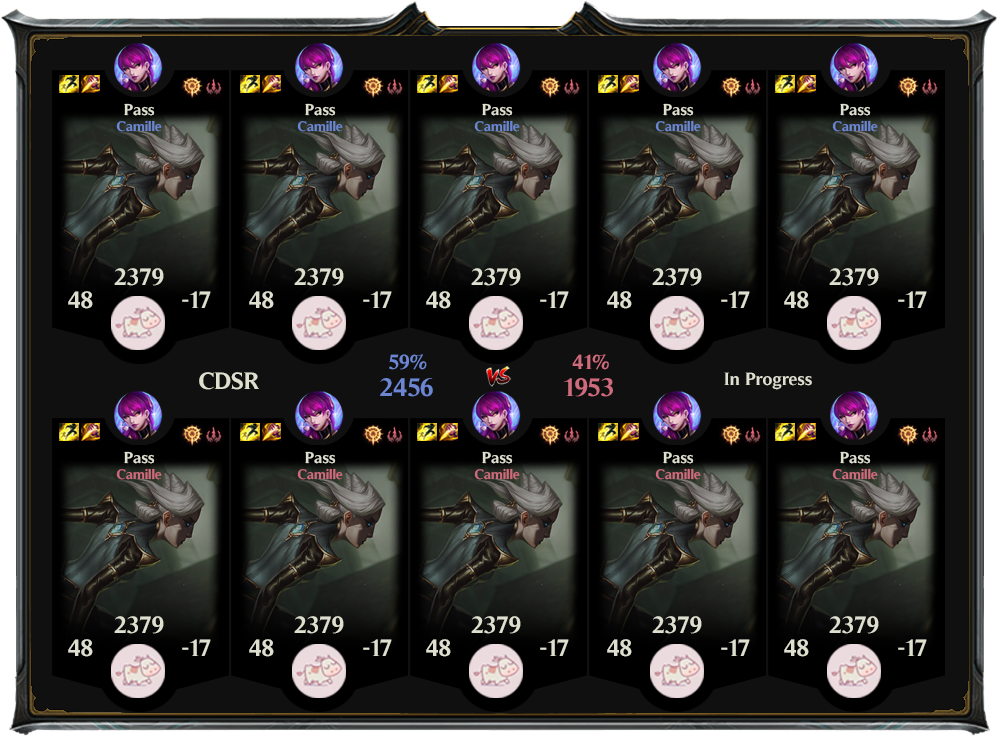
<style>
.page{position:relative;width:997px;height:736px}
.page>*{position:absolute;margin:0}
.t1{font:16px "Timeless-Bold";color:#dfdfd0}
.t2{font:14px "Timeless-Bold";color:#6c86d2}
.t3{font:24px "Timeless-Bold";color:#dfdfd0}
.t4{font:20.8px "Timeless-Bold";color:#6c86d2}
.t5{font:20.8px "Timeless-Bold";color:#ce6b7c}
.t6{font:18px "Timeless-Bold";color:#dfdfd0}
.t7{font:25.8px "Timeless-Bold";color:#6c86d2}
.t8{font:25.8px "Timeless-Bold";color:#ce6b7c}
.t9{font:14px "Timeless-Bold";color:#ce6b7c}
</style>
<div class="page">
<p class="t1" style="left:124px;top:103px;width:31px;height:13px">Pass</p>
<p class="t1" style="left:305px;top:103px;width:31px;height:13px">Pass</p>
<p class="t1" style="left:482px;top:103px;width:31px;height:13px">Pass</p>
<p class="t1" style="left:663px;top:103px;width:31px;height:13px">Pass</p>
<p class="t1" style="left:840px;top:103px;width:31px;height:13px">Pass</p>
<p class="t2" style="left:116px;top:120px;width:46px;height:12px">Camille</p>
<p class="t2" style="left:297px;top:120px;width:46px;height:12px">Camille</p>
<p class="t2" style="left:474px;top:120px;width:46px;height:12px">Camille</p>
<p class="t2" style="left:655px;top:120px;width:46px;height:12px">Camille</p>
<p class="t2" style="left:832px;top:120px;width:46px;height:12px">Camille</p>
<p class="t3" style="left:114px;top:268px;width:50px;height:18px">2379</p>
<p class="t3" style="left:294px;top:268px;width:50px;height:18px">2379</p>
<p class="t3" style="left:471px;top:268px;width:50px;height:18px">2379</p>
<p class="t3" style="left:652px;top:268px;width:50px;height:18px">2379</p>
<p class="t3" style="left:829px;top:268px;width:50px;height:18px">2379</p>
<p class="t3" style="left:68px;top:291px;width:25px;height:18px">48</p>
<p class="t3" style="left:182px;top:291px;width:29px;height:17px">-17</p>
<p class="t3" style="left:249px;top:291px;width:25px;height:18px">48</p>
<p class="t3" style="left:363px;top:291px;width:29px;height:17px">-17</p>
<p class="t3" style="left:426px;top:291px;width:25px;height:18px">48</p>
<p class="t3" style="left:540px;top:291px;width:29px;height:17px">-17</p>
<p class="t3" style="left:607px;top:291px;width:25px;height:18px">48</p>
<p class="t3" style="left:721px;top:291px;width:29px;height:17px">-17</p>
<p class="t3" style="left:784px;top:291px;width:25px;height:18px">48</p>
<p class="t3" style="left:898px;top:291px;width:29px;height:17px">-17</p>
<p class="t4" style="left:389px;top:354px;width:38px;height:16px">59%</p>
<p class="t5" style="left:572px;top:354px;width:37px;height:16px">41%</p>
<p class="t3" style="left:199px;top:372px;width:60px;height:18px">CDSR</p>
<p class="t6" style="left:724px;top:372px;width:88px;height:18px">In Progress</p>
<p class="t7" style="left:380px;top:378px;width:53px;height:19px">2456</p>
<p class="t8" style="left:564px;top:378px;width:49px;height:19px">1953</p>
<p class="t1" style="left:124px;top:451px;width:31px;height:13px">Pass</p>
<p class="t1" style="left:305px;top:451px;width:31px;height:13px">Pass</p>
<p class="t1" style="left:482px;top:451px;width:31px;height:13px">Pass</p>
<p class="t1" style="left:663px;top:451px;width:31px;height:13px">Pass</p>
<p class="t1" style="left:840px;top:451px;width:31px;height:13px">Pass</p>
<p class="t9" style="left:116px;top:468px;width:46px;height:12px">Camille</p>
<p class="t9" style="left:297px;top:468px;width:46px;height:12px">Camille</p>
<p class="t9" style="left:474px;top:468px;width:46px;height:12px">Camille</p>
<p class="t9" style="left:655px;top:468px;width:46px;height:12px">Camille</p>
<p class="t9" style="left:832px;top:468px;width:46px;height:12px">Camille</p>
<p class="t3" style="left:114px;top:616px;width:50px;height:18px">2379</p>
<p class="t3" style="left:294px;top:616px;width:50px;height:18px">2379</p>
<p class="t3" style="left:471px;top:616px;width:50px;height:18px">2379</p>
<p class="t3" style="left:652px;top:616px;width:50px;height:18px">2379</p>
<p class="t3" style="left:829px;top:616px;width:50px;height:18px">2379</p>
<p class="t3" style="left:68px;top:639px;width:25px;height:18px">48</p>
<p class="t3" style="left:182px;top:639px;width:29px;height:17px">-17</p>
<p class="t3" style="left:249px;top:639px;width:25px;height:18px">48</p>
<p class="t3" style="left:363px;top:639px;width:29px;height:17px">-17</p>
<p class="t3" style="left:426px;top:639px;width:25px;height:18px">48</p>
<p class="t3" style="left:540px;top:639px;width:29px;height:17px">-17</p>
<p class="t3" style="left:607px;top:639px;width:25px;height:18px">48</p>
<p class="t3" style="left:721px;top:639px;width:29px;height:17px">-17</p>
<p class="t3" style="left:784px;top:639px;width:25px;height:18px">48</p>
<p class="t3" style="left:898px;top:639px;width:29px;height:17px">-17</p>
</div>
